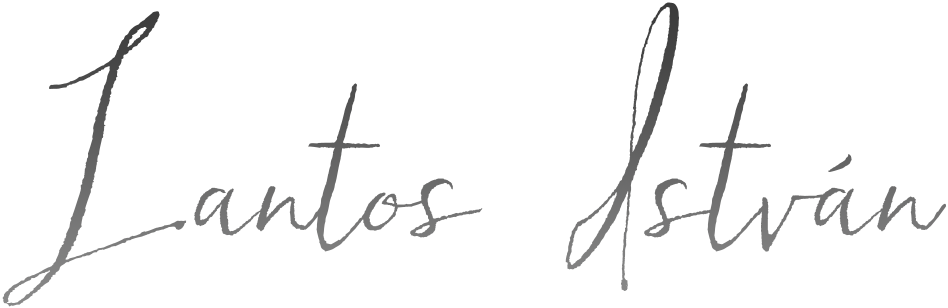
<style>
.page{position:relative;width:948px;height:308px;background:#ffffff}
.page>*{position:absolute;margin:0}
.t1{font:400px "Hollyhock-Regular";color:#6f6f6f}
</style>
<div class="page">
<p class="t1" style="left:2px;top:2px;width:945px;height:305px">Lantos István</p>
</div>
